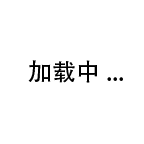
<style>
.page{position:relative;width:144px;height:144px;background:#ffffff}
.page>*{position:absolute;margin:0}
.t1{font:24px "AdobeHeitiStd-Regular";color:#000000}
</style>
<div class="page">
<p class="t1" style="left:28px;top:60px;width:95px;height:23px">加载中...</p>
</div>
